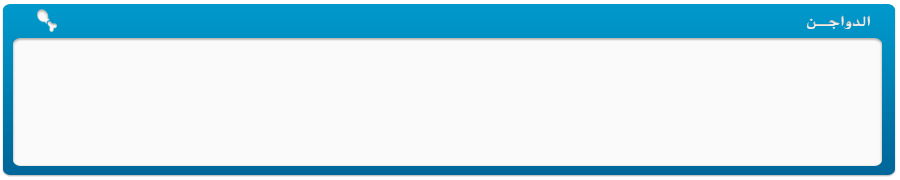
<style>
.page{position:relative;width:900px;height:180px;background:#fafafa}
.page>*{position:absolute;margin:0}
.t1{font:16px "BoutrosAdsMedium";color:#eaeae7}
</style>
<div class="page">
<p class="t1" style="left:806px;top:15px;width:64px;height:14px">الدواجـن</p>
</div>
